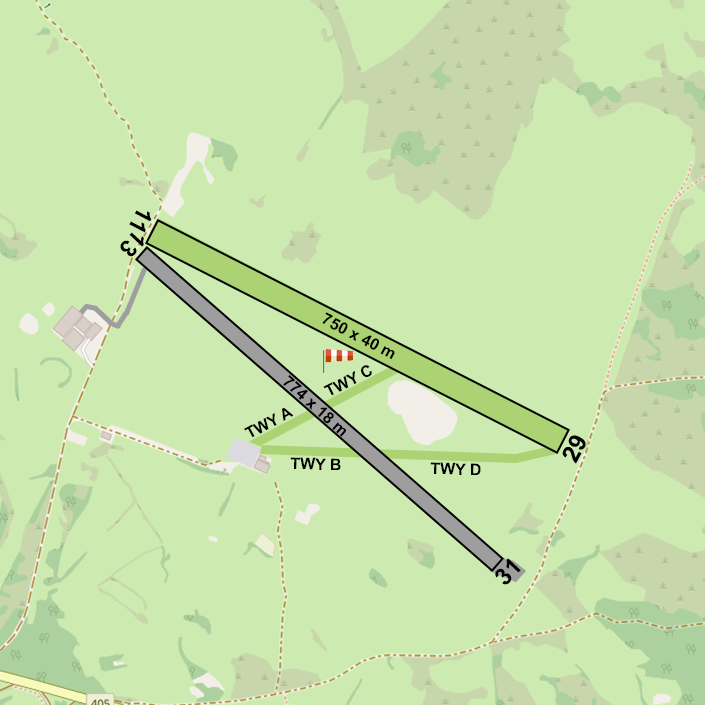
<style>
.page{position:relative;width:705px;height:705px;background:#cdebb0}
.page>*{position:absolute;margin:0}
.t1{font:24px "Arial-BoldMT";color:#000000}
.t2{font:16px "Arial-BoldMT";color:#000000}
</style>
<div class="page">
<p class="t1" style="left:129px;top:210px;width:23px;height:23px;rotate:118deg">11</p>
<p class="t1" style="left:120px;top:232px;width:24px;height:25px;rotate:133deg">13</p>
<p class="t2" style="left:322px;top:312px;width:73px;height:48px;rotate:28deg">750 x 40 m</p>
<p class="t2" style="left:323px;top:365px;width:49px;height:31px;rotate:-27deg">TWY C</p>
<p class="t2" style="left:283px;top:375px;width:63px;height:62px;rotate:41deg">774 x 18 m</p>
<p class="t2" style="left:244px;top:407px;width:50px;height:31px;rotate:-29deg">TWY A</p>
<p class="t2" style="left:290px;top:457px;width:51px;height:14px;rotate:1deg">TWY B</p>
<p class="t2" style="left:430px;top:462px;width:51px;height:14px;rotate:1deg">TWY D</p>
<p class="t1" style="left:495px;top:558px;width:26px;height:27px;rotate:-47deg">31</p>
</div>
